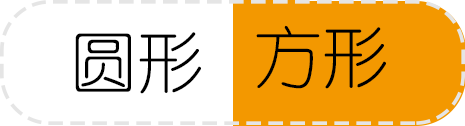
<style>
.page{position:relative;width:465px;height:126px;background:#ffffff}
.page>*{position:absolute;margin:0}
.t1{font:66.7px "YouYuan";color:#000000}
</style>
<div class="page">
<p class="t1" style="left:256px;top:25px;width:130px;height:64px">方形</p>
<p class="t1" style="left:75px;top:32px;width:126px;height:62px">圆形</p>
</div>
